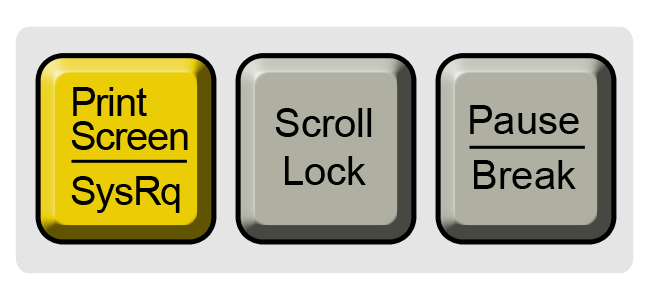
<style>
.page{position:relative;width:650px;height:300px;background:#e5e5e5}
.page>*{position:absolute;margin:0}
.t1{font:40px/34px "ArialMT";letter-spacing:-0.03em;color:#000000}
.t2{font:40px/12px "ArialMT";letter-spacing:-0.03em;color:#000000}
.t3{font:40px/55px "ArialMT";letter-spacing:-0.03em;color:#000000}
.t4{font:40px "ArialMT";color:#000000}
.t5{font:40px/55px "ArialMT";color:#000000}
</style>
<div class="page">
<p class="t1" style="left:71px;top:87px;width:117px;height:126px"><span class="t2">Print<br></span>Screen<br><span class="t3">SysRq</span></p>
<p class="t4" style="left:275px;top:108px;width:97px;height:77px;text-align:center">Scroll<br>Lock</p>
<p class="t5" style="left:470px;top:105px;width:109px;height:84px;text-align:center">Pause<br>Break</p>
</div>
